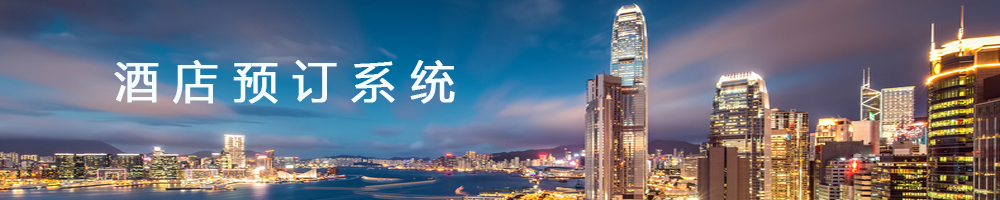
<style>
.page{position:relative;width:1000px;height:200px}
.page>*{position:absolute;margin:0}
.t1{font:44px "MicrosoftYaHei";letter-spacing:0.32em;color:#f5fcfd;font-weight:bold}
</style>
<div class="page">
<p class="t1" style="left:114px;top:60px;width:341px;height:44px">酒店预订系统</p>
</div>
